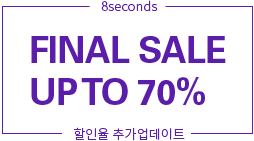
<style>
.page{position:relative;width:254px;height:141px;background:#ffffff}
.page>*{position:absolute;margin:0}
.t1{font:13px "NotoSansCJKkr-Light";letter-spacing:0.01em;color:#5b1eaa}
.t2{font:36px/42px "UniversLTStd-Bold";letter-spacing:-0.025em;color:#5b1eaa}
</style>
<div class="page">
<p class="t1" style="left:101px;top:0px;width:57px;height:11px">8seconds</p>
<p class="t2" style="left:31px;top:36px;width:195px;height:69px">FINAL SALE<br>UP TO 70%</p>
<p class="t1" style="left:74px;top:127px;width:111px;height:14px">할인율 추가업데이트</p>
</div>
